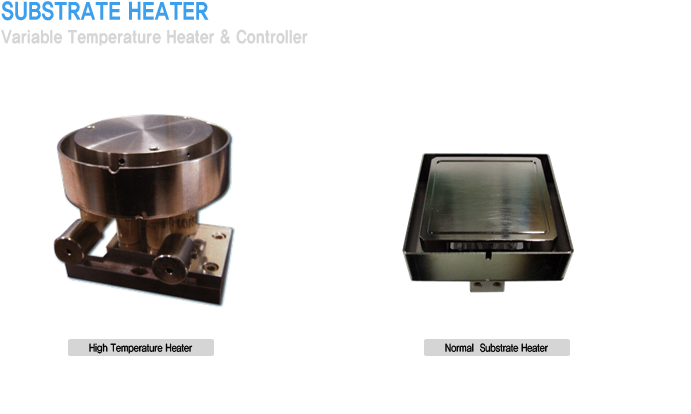
<style>
.page{position:relative;width:691px;height:414px;background:#ffffff}
.page>*{position:absolute;margin:0}
.t1{font:18px/24px "YDIYGO360";color:#d6d5d5;scale:0.82 1}
.t2{font:24px/24px "YDIYGO360";color:#3b9fed;scale:0.82 1}
.t3{font:11px "YDIYGO330";color:#000000;scale:0.82 1}
</style>
<div class="page">
<p class="t1" style="left:1px;top:1px;width:307px;height:45px"><span class="t2">SUBSTRATE HEATER<br></span>Variable Temperature Heater &amp; Controller</p>
<p class="t3" style="left:89px;top:343px;width:104px;height:11px">High Temperature Heater</p>
<p class="t3" style="left:445px;top:343px;width:103px;height:10px">Normal  Substrate Heater</p>
</div>
